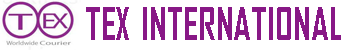
<style>
.page{position:relative;width:350px;height:50px;background:#ffffff}
.page>*{position:absolute;margin:0}
.t1{font:42.7px "AgencyFB-Bold";color:#881886;scale:0.9 1}
</style>
<div class="page">
<p class="t1" style="left:86px;top:7px;width:255px;height:33px">TEX INTERNATIONAL</p>
</div>
